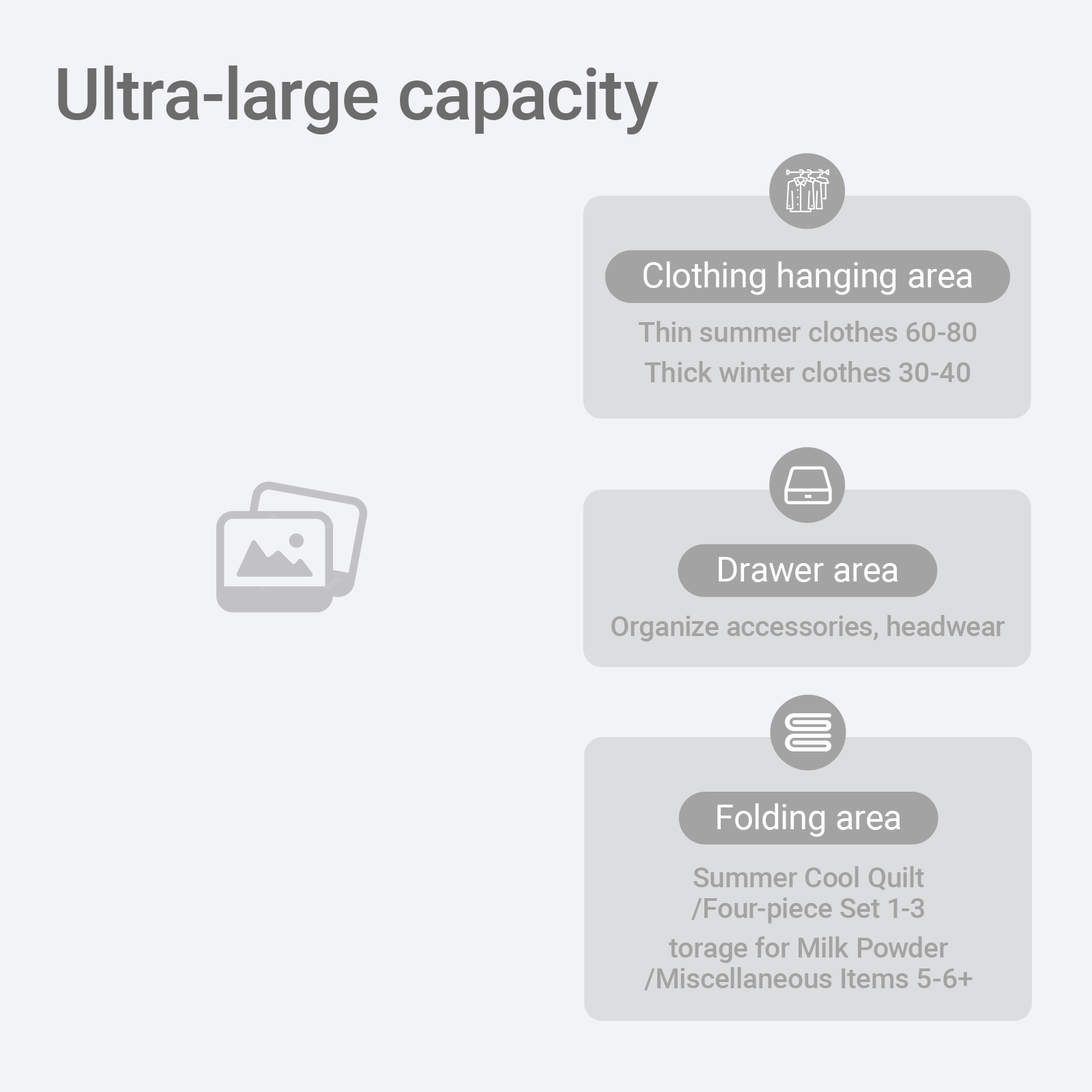
<style>
.page{position:relative;width:1092px;height:1092px;background:#f2f3f6}
.page>*{position:absolute;margin:0}
.t1{font:71.3px "Roboto-Medium";color:#6c6c6c}
.t2{font:34.9px "Roboto-Regular";color:#ffffff}
.t3{font:27.7px "Roboto-Medium";color:#a3a3a3}
.t4{font:27.7px/30.9px "Roboto-Medium";color:#a3a3a3}
</style>
<div class="page">
<p class="t1" style="left:58px;top:66px;width:601px;height:68px">Ultra-large capacity</p>
<p class="t2" style="left:644px;top:261px;width:328px;height:34px">Clothing hanging area</p>
<p class="t3" style="left:638px;top:321px;width:339px;height:21px">Thin summer clothes 60-80</p>
<p class="t3" style="left:644px;top:361px;width:327px;height:21px">Thick winter clothes 30-40</p>
<p class="t2" style="left:719px;top:557px;width:178px;height:25px">Drawer area</p>
<p class="t3" style="left:612px;top:615px;width:393px;height:27px">Organize accessories, headwear</p>
<p class="t2" style="left:717px;top:803px;width:183px;height:34px">Folding area</p>
<p class="t4" style="left:691px;top:866px;width:233px;height:57px;text-align:center">Summer Cool Quilt<br>/Four-piece Set 1-3</p>
<p class="t4" style="left:644px;top:936px;width:329px;height:54px;text-align:center">torage for Milk Powder<br>/Miscellaneous Items 5-6+</p>
</div>
